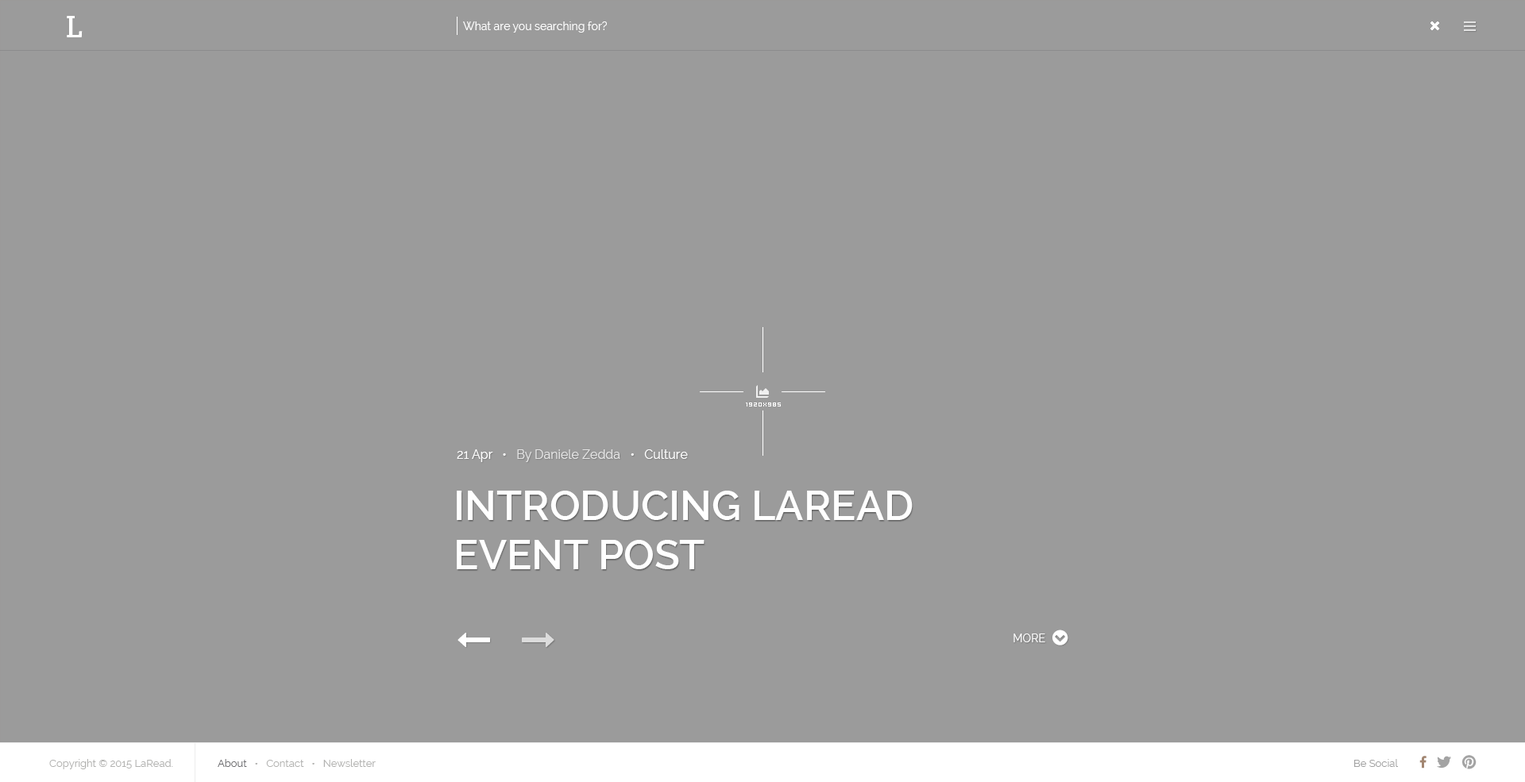
<style>
.page{position:relative;width:1525px;height:782px;background:#9b9b9b}
.page>*{position:absolute;margin:0}
.t1{font:11.1px "Raleway";color:#ffffff}
.t2{font:12.7px "Raleway";color:#e4e4e4}
.t3{font:12.7px "Raleway";color:#ffffff}
.t4{font:41.3px "Raleway-SemiBold";color:#ffffff;text-transform:uppercase}
.t5{font:11.1px "Raleway";color:#ffffff;text-transform:uppercase}
.t6{font:10.3px "Raleway";color:#b3b3b1}
.t7{font:10.3px "Raleway";color:#6d6d70}
.t8{font:10.3px "Raleway";color:#a3a3a3}
</style>
<div class="page">
<p class="t1" style="left:463px;top:21px;width:144px;height:12px">What are you searching for?</p>
<p class="t2" style="left:457px;top:449px;width:231px;height:13px"><span class="t3">21 Apr   •   </span>By Daniele Zedda<span class="t3">   •   Culture</span></p>
<p class="t4" style="left:457px;top:491px;width:455px;height:78px">Introducing LaRead <br>EVENT Post</p>
<p class="t5" style="left:1013px;top:634px;width:32px;height:8px">MORE</p>
<p class="t6" style="left:49px;top:759px;width:124px;height:10px">Copyright © 2015 LaRead.</p>
<p class="t6" style="left:218px;top:759px;width:158px;height:8px"><span class="t7">About</span>   •   Contact   •   Newsletter</p>
<p class="t8" style="left:1354px;top:759px;width:44px;height:8px">Be Social</p>
</div>
